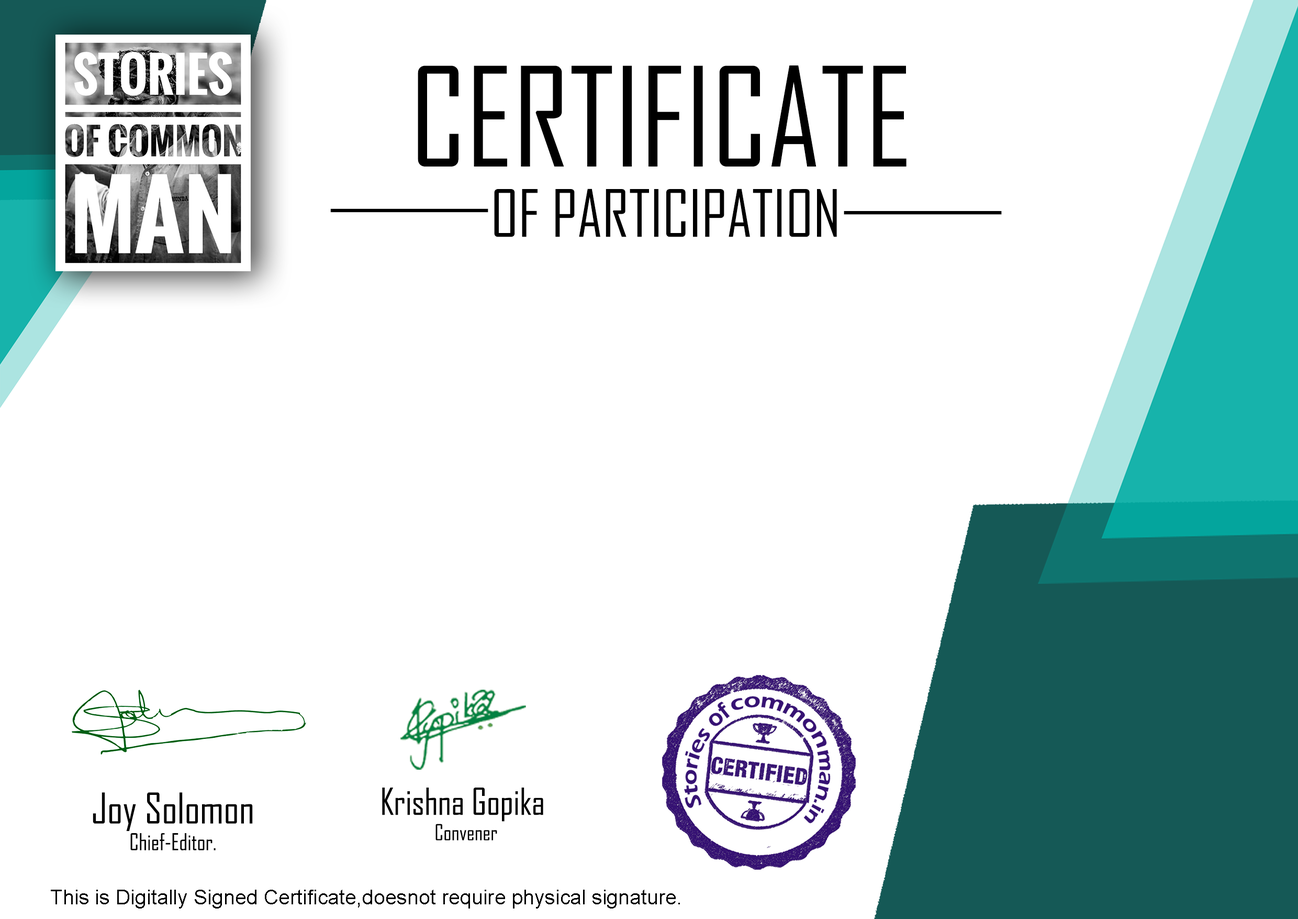
<style>
.page{position:relative;width:1298px;height:919px;background:#ffffff}
.page>*{position:absolute;margin:0}
.t1{font:131.7px "AgencyFB-Reg";color:#000000}
.t2{font:62.3px "AgencyFB-Reg";color:#000000}
.t3{font:22.2px "AgencyFB-Reg";color:#000000}
.t4{font:40.7px "AgencyFB-Reg";color:#000000}
.t5{font:35.6px "AgencyFB-Reg";color:#000000}
.t6{font:21.2px "AgencyFB-Reg";color:#000000}
.t7{font:20.7px "ArialMT";color:#000000}
</style>
<div class="page">
<p class="t1" style="left:418px;top:65px;width:489px;height:101px">CERTIFICATE</p>
<p class="t2" style="left:494px;top:188px;width:343px;height:49px">OF PARTICIPATION</p>
<p class="t2" style="left:330px;top:208px;width:158px;height:5px">_______</p>
<p class="t2" style="left:844px;top:211px;width:158px;height:4px">_______</p>
<p class="t3" style="left:93px;top:792px;width:160px;height:58px;text-align:center"><span class="t4">Joy Solomon<br></span>Chief-Editor.</p>
<p class="t5" style="left:382px;top:787px;width:161px;height:53px;text-align:center">Krishna Gopika <br><span class="t6">Convener</span></p>
<p class="t7" style="left:51px;top:889px;width:629px;height:19px">This is Digitally Signed Certificate,doesnot require physical signature.</p>
</div>
